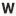
<style>
.page{position:relative;width:16px;height:16px;background:#ffffff}
.page>*{position:absolute;margin:0}
.t1{font:15px "Industry-Black";color:#2b2a28;text-transform:uppercase}
</style>
<div class="page">
<p class="t1" style="left:1px;top:2px;width:14px;height:12px">W</p>
</div>
